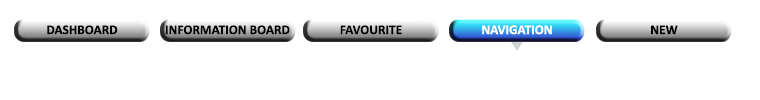
<style>
.page{position:relative;width:760px;height:100px;background:#ffffff}
.page>*{position:absolute;margin:0}
.t1{font:13.3px "Calibri-Bold";color:#000000}
.t2{font:13.3px "Calibri-Bold";color:#ffffff}
</style>
<div class="page">
<p class="t1" style="left:47px;top:25px;width:71px;height:10px">DASHBOARD</p>
<p class="t1" style="left:165px;top:25px;width:125px;height:10px">INFORMATION BOARD</p>
<p class="t1" style="left:340px;top:25px;width:62px;height:10px">FAVOURITE</p>
<p class="t2" style="left:482px;top:25px;width:70px;height:10px">NAVIGATION</p>
<p class="t1" style="left:651px;top:25px;width:27px;height:10px">NEW</p>
</div>
